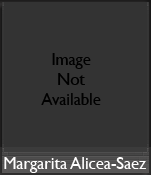
<style>
.page{position:relative;width:151px;height:175px;background:#333333}
.page>*{position:absolute;margin:0}
.t1{font:16.7px "GillSansMT";color:#000000}
.t2{font:16.7px "GillSansMT";color:#fffefe}
</style>
<div class="page">
<p class="t1" style="left:41px;top:53px;width:60px;height:52px;text-align:center">Image<br>Not<br>Available</p>
<p class="t2" style="left:4px;top:157px;width:142px;height:16px">Margarita Alicea-Saez</p>
</div>
